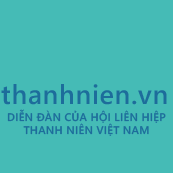
<style>
.page{position:relative;width:173px;height:173px;background:#45bbb6}
.page>*{position:absolute;margin:0}
.t1{font:27px "SegoeWP-Semibold";letter-spacing:0.025em;color:#1d6d9b}
.t2{font:11px "SegoeWP-Semibold";letter-spacing:0.025em;color:#1d6d9b}
</style>
<div class="page">
<p class="t1" style="left:1px;top:84px;width:166px;height:21px">thanhnien.vn</p>
<p class="t2" style="left:7px;top:109px;width:159px;height:27px">DIỄN ĐÀN CỦA HỘI LIÊN HIỆP<br>     THANH NIÊN VIỆT NAM</p>
</div>
